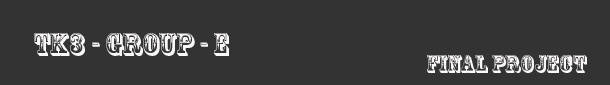
<style>
.page{position:relative;width:610px;height:85px;background:#333333}
.page>*{position:absolute;margin:0}
.t1{font:30px "RosewoodStd-Regular";color:#faf7f7}
.t2{font:24px "RosewoodStd-Regular";color:#faf7f7}
</style>
<div class="page">
<p class="t1" style="left:34px;top:33px;width:195px;height:23px">TK3 - GROUP - E</p>
<p class="t2" style="left:427px;top:55px;width:160px;height:18px">FINAL PROJECT</p>
</div>
